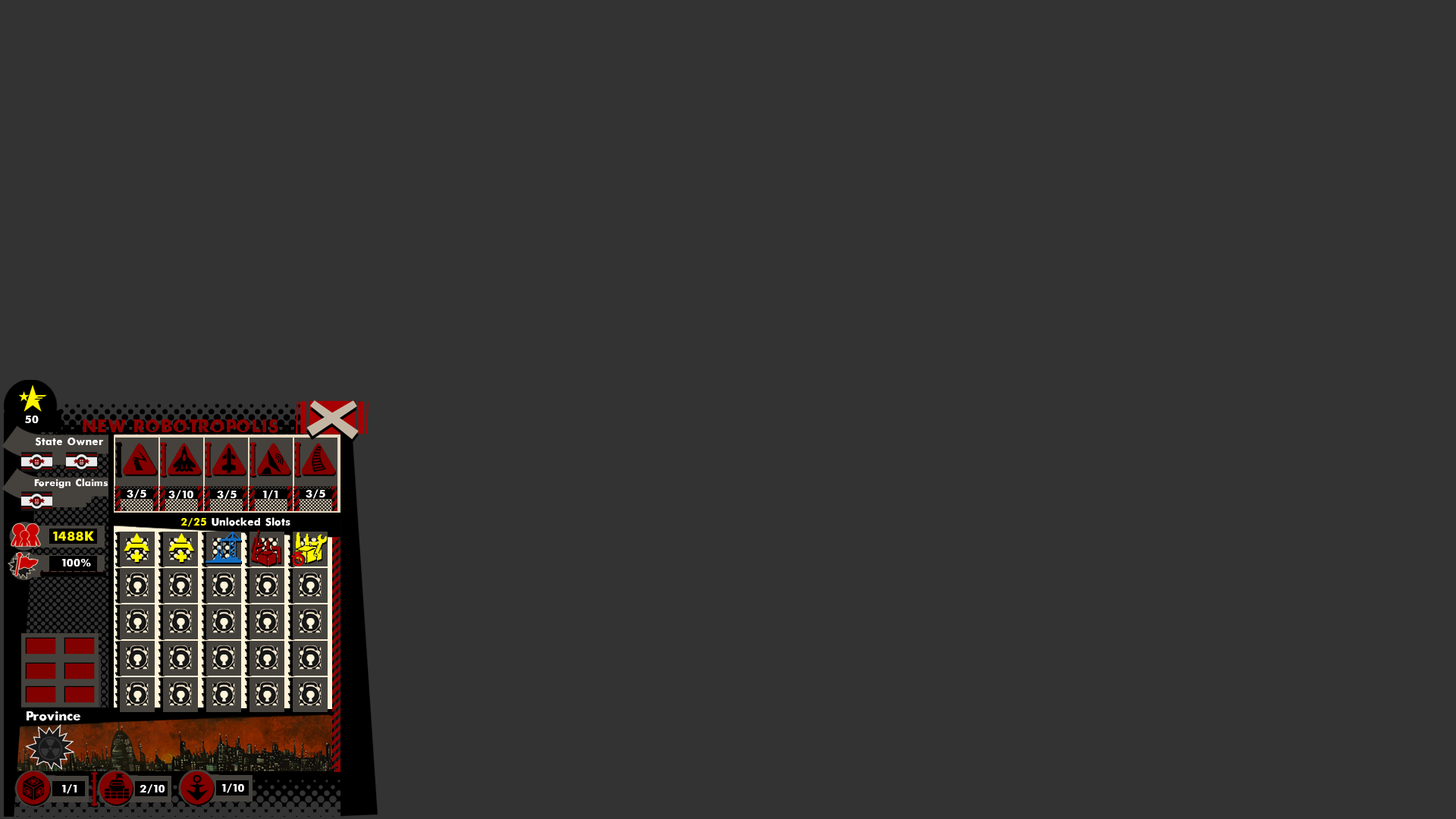
<style>
.page{position:relative;width:1456px;height:819px;background:#333333}
.page>*{position:absolute;margin:0}
.t1{font:12.3px "Futura-Bold";color:#ffffff}
.t2{font:20px "Futura-Bold";color:#890101}
.t3{font:11.6px "Futura-Bold";color:#ffffff}
.t4{font:11px "Futura-Bold";color:#ffffff}
.t5{font:11.6px "Futura-Bold";color:#fff600}
.t6{font:14.7px "Futura-Bold";color:#fff600}
.t7{font:14px "Futura-Bold";color:#ffffff}
</style>
<div class="page">
<p class="t1" style="left:25px;top:416px;width:14px;height:7px">50</p>
<p class="t2" style="left:83px;top:419px;width:195px;height:14px">NEW ROBOTROPOLIS</p>
<p class="t3" style="left:35px;top:438px;width:68px;height:8px">State Owner</p>
<p class="t4" style="left:34px;top:479px;width:74px;height:9px">Foreign Claims</p>
<p class="t1" style="left:127px;top:489px;width:19px;height:10px">3/5</p>
<p class="t1" style="left:168px;top:490px;width:25px;height:10px">3/10</p>
<p class="t1" style="left:217px;top:490px;width:20px;height:10px">3/5</p>
<p class="t1" style="left:262px;top:490px;width:16px;height:10px">1/1</p>
<p class="t1" style="left:306px;top:489px;width:19px;height:10px">3/5</p>
<p class="t3" style="left:180px;top:517px;width:110px;height:10px"><span class="t5">2/25</span> Unlocked Slots</p>
<p class="t6" style="left:52px;top:531px;width:42px;height:10px">1488K</p>
<p class="t1" style="left:61px;top:559px;width:30px;height:7px">100%</p>
<p class="t7" style="left:27px;top:711px;width:53px;height:10px">Province</p>
<p class="t1" style="left:61px;top:784px;width:16px;height:10px">1/1</p>
<p class="t1" style="left:140px;top:784px;width:25px;height:10px">2/10</p>
<p class="t1" style="left:221px;top:783px;width:23px;height:10px">1/10</p>
</div>
